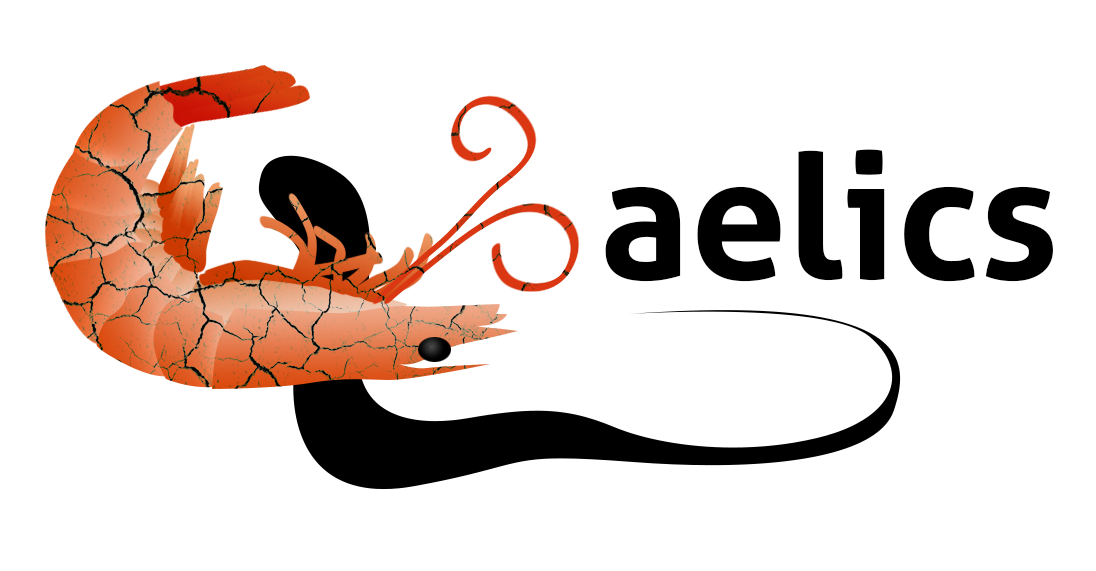
<style>
.page{position:relative;width:1096px;height:571px;background:#ffffff}
.page>*{position:absolute;margin:0}
.t1{font:173.6px "Aller-Bold";color:#000000}
</style>
<div class="page">
<p class="t1" style="left:605px;top:149px;width:448px;height:133px">aelics</p>
</div>
